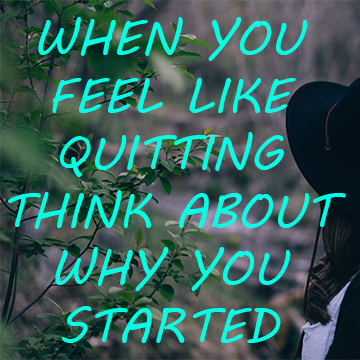
<style>
.page{position:relative;width:360px;height:360px}
.page>*{position:absolute;margin:0}
.t1{font:48px "MVBoli";color:#00ffe4}
</style>
<div class="page">
<p class="t1" style="left:8px;top:17px;width:338px;height:326px;text-align:center">WHEN YOU<br>FEEL LIKE<br>QUITTING<br>THINK ABOUT<br>WHY YOU<br>STARTED</p>
</div>
